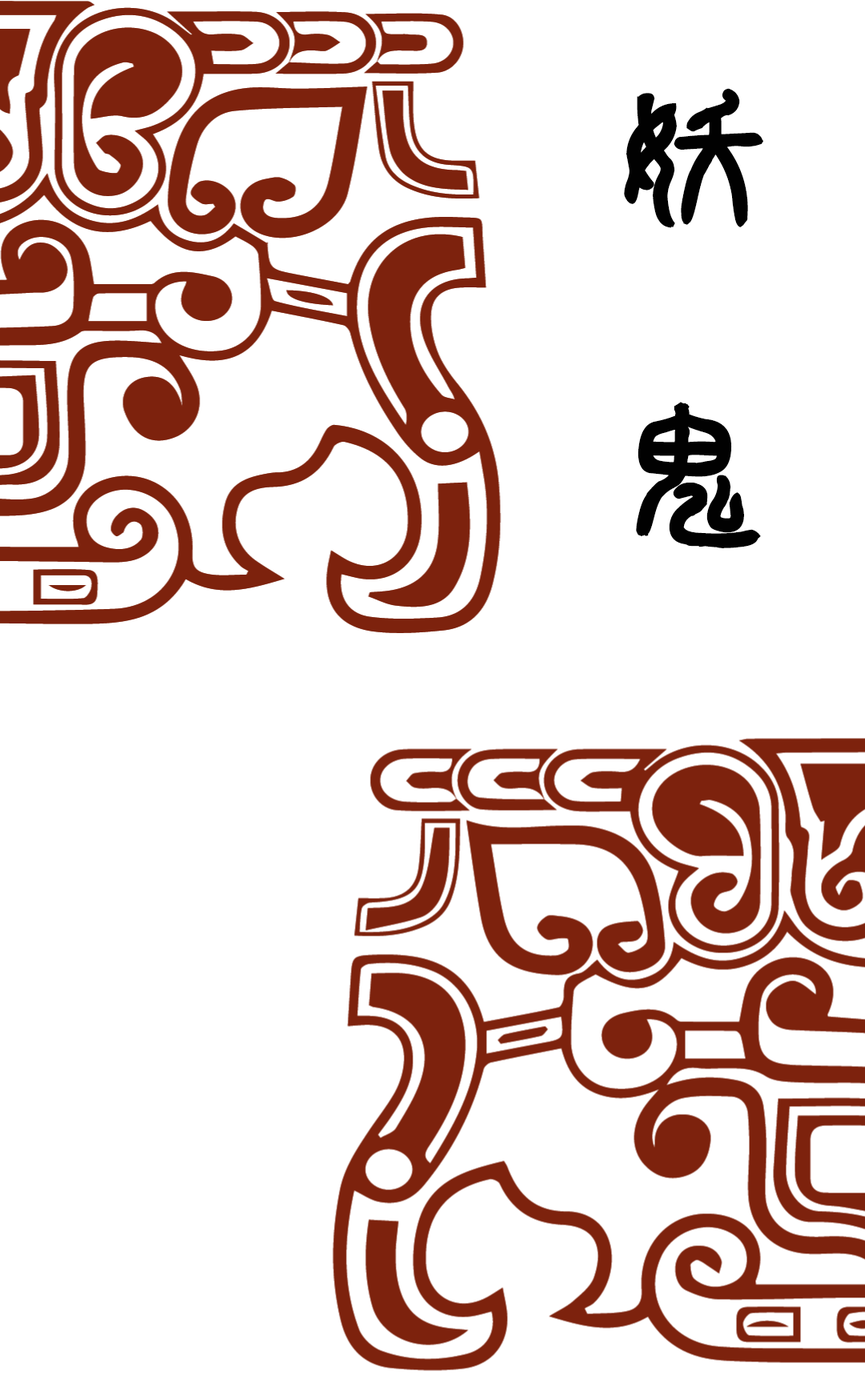
<style>
.page{position:relative;width:865px;height:1379px;background:#ffffff}
.page>*{position:absolute;margin:0}
.t1{font:160.1px "AaMeirenzhuanjf";letter-spacing:0.8em;color:#010101;font-weight:bold}
</style>
<div class="page">
<p class="t1" style="left:624px;top:88px;width:139px;height:460px">妖鬼</p>
</div>
